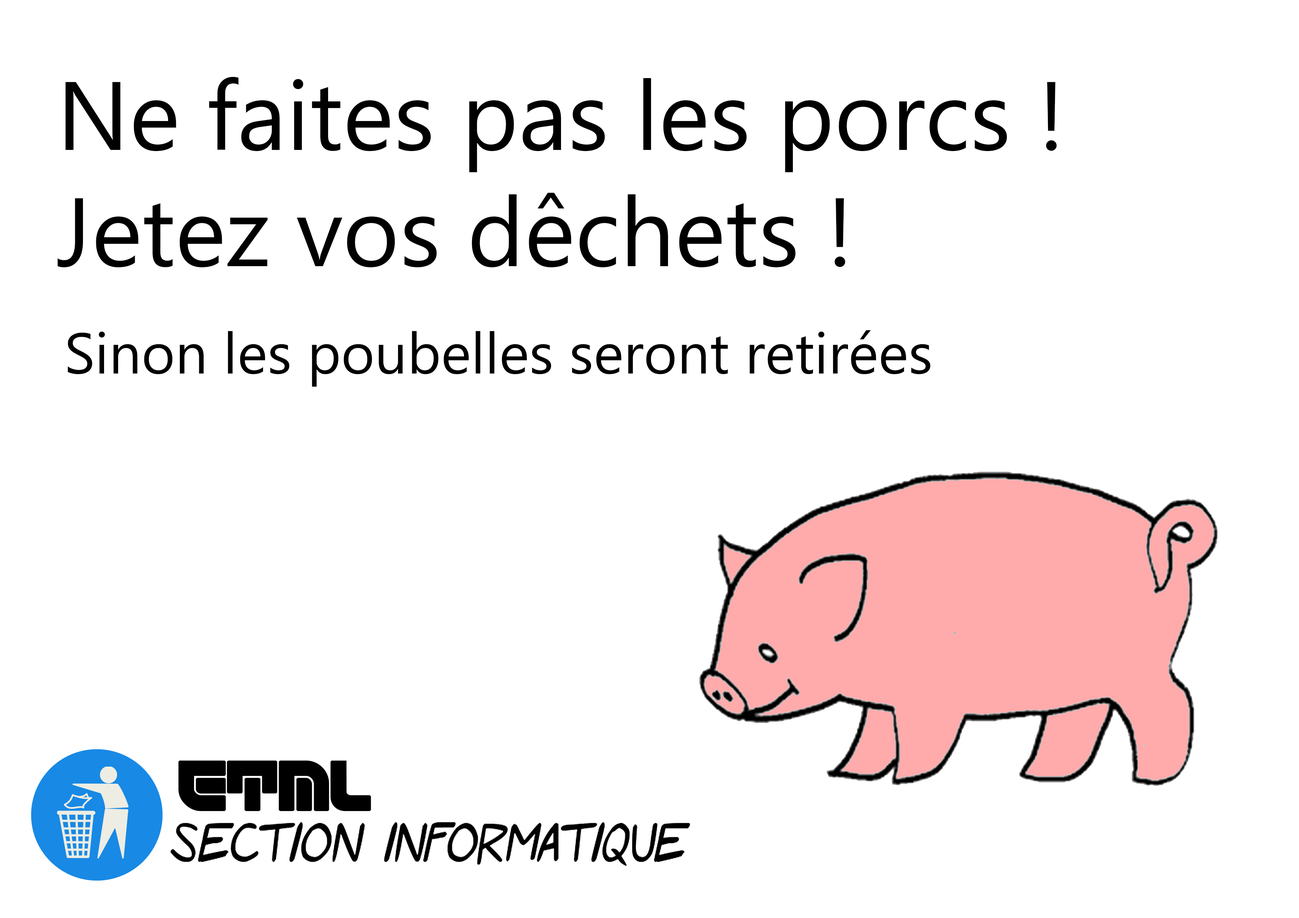
<style>
.page{position:relative;width:1299px;height:918px;background:#ffffff}
.page>*{position:absolute;margin:0}
.t1{font:97px "MicrosoftPhagsPa";color:#000000}
.t2{font:57.3px "MicrosoftPhagsPa";color:#000000}
.t3{font:49.6px "ETML-Regular";color:#000000;font-weight:bold}
</style>
<div class="page">
<p class="t1" style="left:57px;top:77px;width:1000px;height:191px">Ne faites pas les porcs !<br>Jetez vos dêchets !</p>
<p class="t2" style="left:68px;top:330px;width:862px;height:57px">Sinon les poubelles seront retirées</p>
<p class="t3" style="left:178px;top:760px;width:193px;height:52px">ETML</p>
</div>
